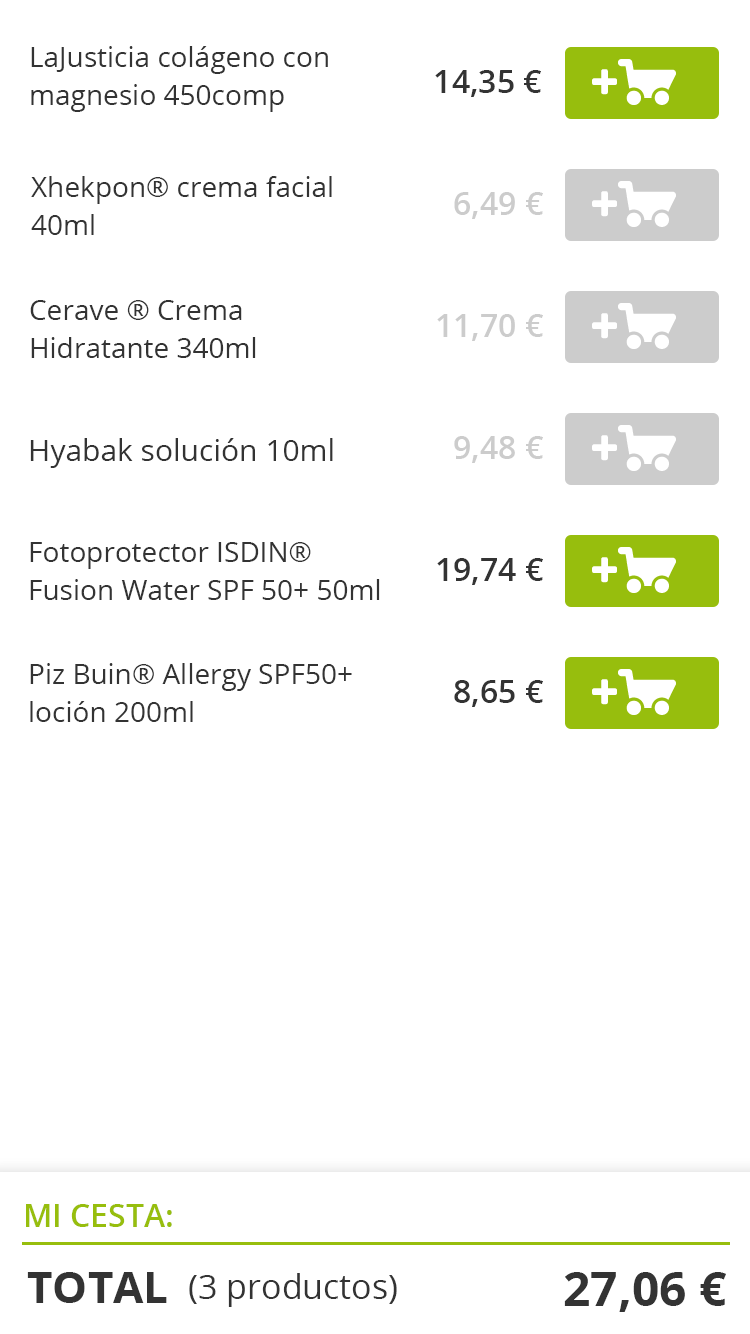
<style>
.page{position:relative;width:750px;height:1334px;background:#ffffff}
.page>*{position:absolute;margin:0}
.t1{font:28px/38px "OpenSans";color:#333333}
.t2{font:32px "OpenSans-Semibold";color:#333333}
.t3{font:32px "OpenSans-Semibold";color:#cccccc}
.t4{font:30px "OpenSans";color:#333333}
.t5{font:32px "OpenSans-Semibold";color:#97be0d}
.t6{font:44px "OpenSans-Bold";color:#333333}
.t7{font:34px "OpenSans";color:#333333}
.t8{font:48px "OpenSans-Bold";color:#333333}
</style>
<div class="page">
<p class="t1" style="left:31px;top:46px;width:297px;height:66px">LaJusticia colágeno con magnesio 450comp</p>
<p class="t2" style="left:435px;top:70px;width:106px;height:27px">14,35 €</p>
<p class="t1" style="left:31px;top:176px;width:301px;height:59px">Xhekpon® crema facial 40ml</p>
<p class="t3" style="left:454px;top:192px;width:89px;height:27px">6,49 €</p>
<p class="t1" style="left:30px;top:300px;width:226px;height:58px">Cerave ® Crema Hidratante 340ml</p>
<p class="t3" style="left:437px;top:314px;width:106px;height:27px">11,70 €</p>
<p class="t4" style="left:30px;top:438px;width:303px;height:30px">Hyabak solución 10ml</p>
<p class="t3" style="left:454px;top:436px;width:89px;height:27px">9,48 €</p>
<p class="t1" style="left:30px;top:542px;width:350px;height:58px">Fotoprotector ISDIN® Fusion Water SPF 50+ 50ml</p>
<p class="t2" style="left:437px;top:558px;width:106px;height:27px">19,74 €</p>
<p class="t1" style="left:30px;top:663px;width:322px;height:59px">Piz Buin® Allergy SPF50+ loción 200ml</p>
<p class="t2" style="left:454px;top:680px;width:89px;height:27px">8,65 €</p>
<p class="t5" style="left:26px;top:1204px;width:146px;height:23px">MI CESTA:</p>
<p class="t6" style="left:27px;top:1272px;width:140px;height:31px">TOTAL</p>
<p class="t7" style="left:189px;top:1273px;width:208px;height:34px">(3 productos)</p>
<p class="t8" style="left:564px;top:1272px;width:162px;height:40px">27,06 €</p>
</div>
